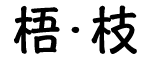
<style>
.page{position:relative;width:150px;height:63px;background:#ffffff}
.page>*{position:absolute;margin:0}
.t1{font:12px "HannotateSC-W5";color:#000000;text-transform:uppercase;font-weight:bold}
</style>
<div class="page">
<p class="t1" style="left:14px;top:5px;width:123px;height:49px">梧·枝</p>
</div>
